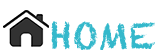
<style>
.page{position:relative;width:160px;height:50px;background:#ffffff}
.page>*{position:absolute;margin:0}
.t1{font:36px "Chalkduster";color:#34b8cb}
</style>
<div class="page">
<p class="t1" style="left:51px;top:21px;width:104px;height:31px">HOME</p>
</div>
